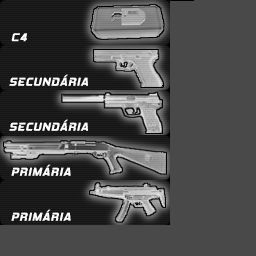
<style>
.page{position:relative;width:256px;height:256px;background:#494949}
.page>*{position:absolute;margin:0}
.t1{font:11.5px "HemiHeadRg-BoldItalic";letter-spacing:0.08em;color:#ffffff;text-transform:uppercase}
</style>
<div class="page">
<p class="t1" style="left:9px;top:74px;width:79px;height:12px">SECUNDÁRIA</p>
<p class="t1" style="left:9px;top:119px;width:79px;height:12px">SECUNDÁRIA</p>
<p class="t1" style="left:11px;top:164px;width:60px;height:12px">PRIMÁRIA</p>
<p class="t1" style="left:11px;top:209px;width:60px;height:12px">PRIMÁRIA</p>
</div>
